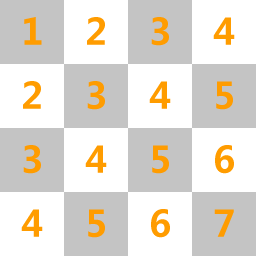
<style>
.page{position:relative;width:256px;height:256px;background:#c4c4c4}
.page>*{position:absolute;margin:0}
.t1{font:36px "MicrosoftYaHei-Bold";color:#ff9c00}
</style>
<div class="page">
<p class="t1" style="left:24px;top:17px;width:18px;height:28px">1</p>
<p class="t1" style="left:87px;top:17px;width:18px;height:28px">2</p>
<p class="t1" style="left:151px;top:17px;width:18px;height:29px">3</p>
<p class="t1" style="left:213px;top:17px;width:22px;height:28px">4</p>
<p class="t1" style="left:23px;top:81px;width:18px;height:28px">2</p>
<p class="t1" style="left:87px;top:81px;width:18px;height:29px">3</p>
<p class="t1" style="left:149px;top:81px;width:22px;height:28px">4</p>
<p class="t1" style="left:216px;top:81px;width:17px;height:29px">5</p>
<p class="t1" style="left:23px;top:145px;width:18px;height:29px">3</p>
<p class="t1" style="left:85px;top:145px;width:22px;height:28px">4</p>
<p class="t1" style="left:152px;top:145px;width:17px;height:29px">5</p>
<p class="t1" style="left:215px;top:145px;width:19px;height:29px">6</p>
<p class="t1" style="left:21px;top:209px;width:22px;height:28px">4</p>
<p class="t1" style="left:88px;top:209px;width:17px;height:29px">5</p>
<p class="t1" style="left:151px;top:209px;width:19px;height:29px">6</p>
<p class="t1" style="left:214px;top:209px;width:20px;height:28px">7</p>
</div>
